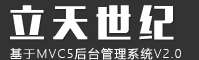
<style>
.page{position:relative;width:199px;height:60px;background:#333333}
.page>*{position:absolute;margin:0}
.t1{font:36px "MFLiHei_Noncommercial-Regular";letter-spacing:0.2em;color:#ffffff}
.t2{font:12px "MicrosoftYaHeiLight";letter-spacing:0.1em;color:#ffffff}
</style>
<div class="page">
<p class="t1" style="left:10px;top:5px;width:164px;height:35px">立天世纪</p>
<p class="t2" style="left:10px;top:47px;width:171px;height:13px">基于MVC5后台管理系统V2.0</p>
</div>
